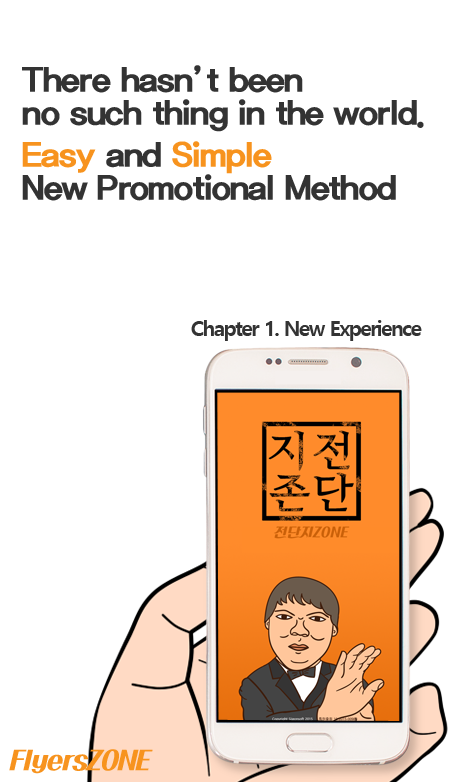
<style>
.page{position:relative;width:456px;height:782px;background:#ffffff}
.page>*{position:absolute;margin:0}
.t1{font:33.3px/8.3px "KoreanPOR-B";letter-spacing:-0.075em;color:#333333}
.t2{font:33.3px/33.3px "KoreanPOR-B";letter-spacing:-0.075em;color:#333333}
.t3{font:33.3px/8.3px "KoreanPOR-B";letter-spacing:-0.075em;color:#f7931e}
.t4{font:33.3px/33.3px "KoreanPOR-B";letter-spacing:-0.075em;color:#f7931e}
.t5{font:20.8px "MalgunGothicBold";letter-spacing:-0.075em;color:#333333}
.t6{font:25px "KoreanPDSR-R";letter-spacing:-0.05em;color:#f7931e}
</style>
<div class="page">
<p class="t1" style="left:22px;top:65px;width:402px;height:136px"><span class="t2">There hasn’t been<br>no s</span>uch thing in the world.<br><br><span class="t3">E</span><span class="t4">asy</span><span class="t2"> and </span><span class="t4">Simple<br></span><span class="t2">New Promotional Method</span></p>
<p class="t5" style="left:191px;top:320px;width:231px;height:21px">Chapter 1. New Experience</p>
<p class="t6" style="left:9px;top:749px;width:144px;height:25px">FlyersZONE</p>
</div>
